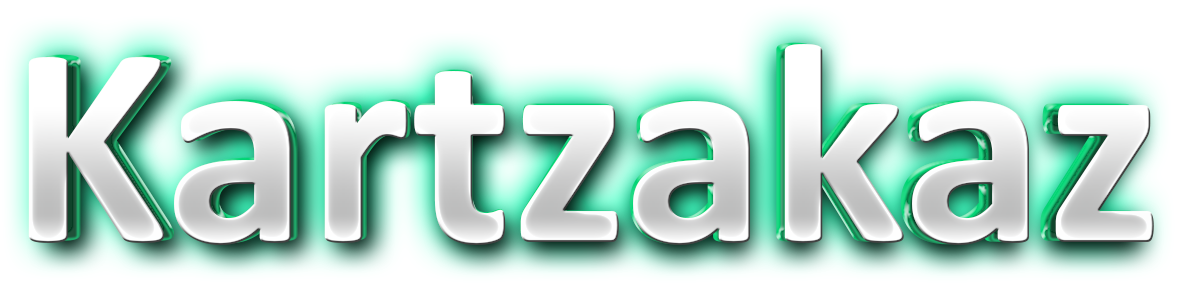
<style>
.page{position:relative;width:1179px;height:288px;background:#ffffff}
.page>*{position:absolute;margin:0}
.t1{font:289.1px "Calibri-Bold";letter-spacing:-0.025em;font-weight:bold}
</style>
<div class="page">
<p class="t1" style="left:28px;top:44px;width:1126px;height:201px">Kartzakaz</p>
</div>
